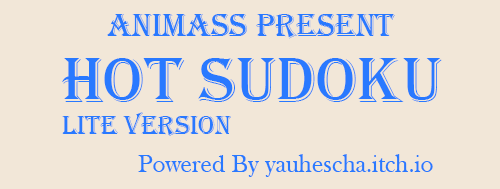
<style>
.page{position:relative;width:500px;height:189px;background:#f2e7d8}
.page>*{position:absolute;margin:0}
.t1{font:33px "Algerian";color:#2979ff}
.t2{font:27px "Algerian";color:#2979ff}
.t3{font:66px "Algerian";color:#2979ff}
.t4{font:25px "BaskOldFace";color:#2979ff}
</style>
<div class="page">
<p class="t1" style="left:107px;top:14px;width:288px;height:25px">AnimAss present</p>
<p class="t2" style="left:62px;top:58px;width:380px;height:78px"><span class="t3">HOT SUDOKU<br></span>Lite version</p>
<p class="t4" style="left:138px;top:154px;width:295px;height:23px">Powered By yauhescha.itch.io</p>
</div>
